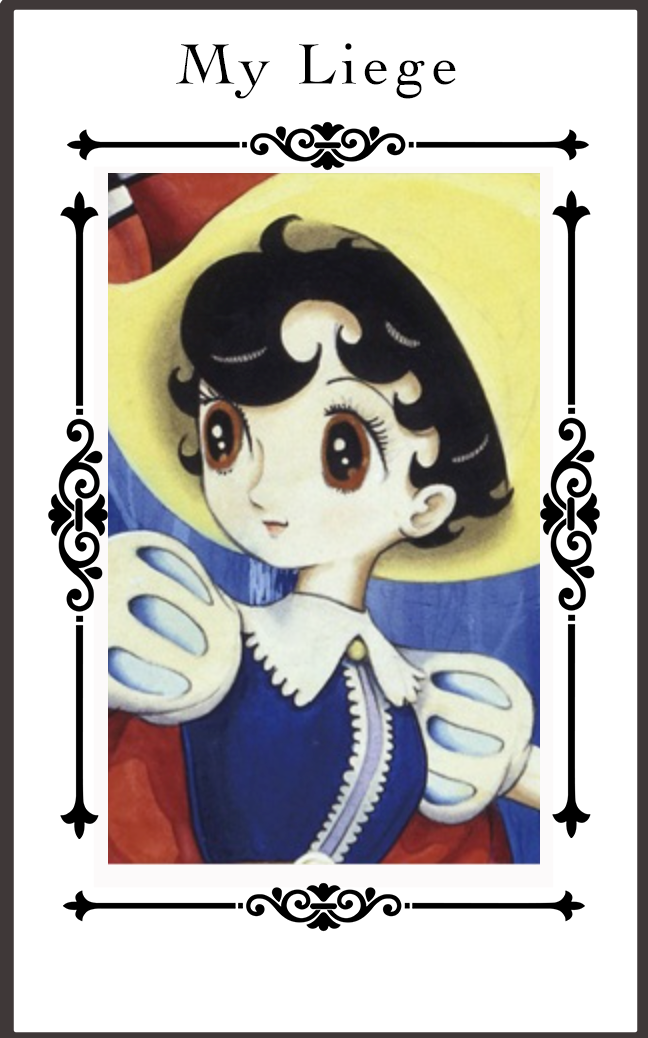
<style>
.page{position:relative;width:648px;height:1038px;background:#ffffff}
.page>*{position:absolute;margin:0}
.t1{font:60px "Cochin";letter-spacing:0.1em;color:#000000}
</style>
<div class="page">
<p class="t1" style="left:176px;top:43px;width:280px;height:56px">My Liege</p>
</div>
